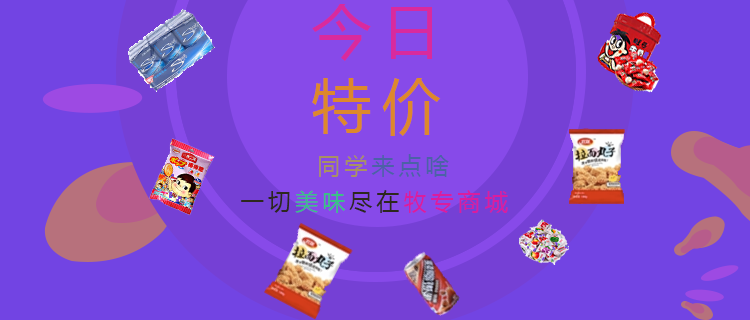
<style>
.page{position:relative;width:750px;height:320px;background:#7244e3}
.page>*{position:absolute;margin:0}
.t1{font:59px/75.2px "MicrosoftYaHei";letter-spacing:0.18em;color:#d92a9d}
.t2{font:59px/75.2px "MicrosoftYaHei";letter-spacing:0.18em;color:#dd882c}
.t3{font:23px/36.1px "MicrosoftYaHei";letter-spacing:0.18em;color:#da1d9e}
.t4{font:23px/36.1px "MicrosoftYaHei";letter-spacing:0.18em;color:#2d281d}
.t5{font:23px/36.1px "MicrosoftYaHei";letter-spacing:0.18em;color:#a99163}
.t6{font:23px/36.1px "MicrosoftYaHei";letter-spacing:0.18em;color:#4c61a7}
.t7{font:23px/36.1px "MicrosoftYaHei";letter-spacing:0.18em;color:#3ac086}
</style>
<div class="page">
<p class="t1" style="left:312px;top:4px;width:129px;height:132px">今日<br><span class="t2">特价</span></p>
<p class="t3" style="left:241px;top:154px;width:267px;height:59px"><span class="t4">     </span><span class="t5">  同学</span><span class="t6">来点啥<br></span><span class="t4">一切</span><span class="t7">美味</span><span class="t4">尽在</span>牧专商城</p>
</div>
